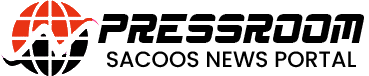
<style>
.page{position:relative;width:369px;height:76px;background:#ffffff}
.page>*{position:absolute;margin:0}
.t1{font:36.1px "ESP_Italic";color:#000000}
.t2{font:22.1px "Poppins-Medium";color:#000000}
</style>
<div class="page">
<p class="t1" style="left:98px;top:14px;width:266px;height:29px">PRESSROOM</p>
<p class="t2" style="left:107px;top:51px;width:249px;height:17px">SACOOS NEWS PORTAL</p>
</div>
